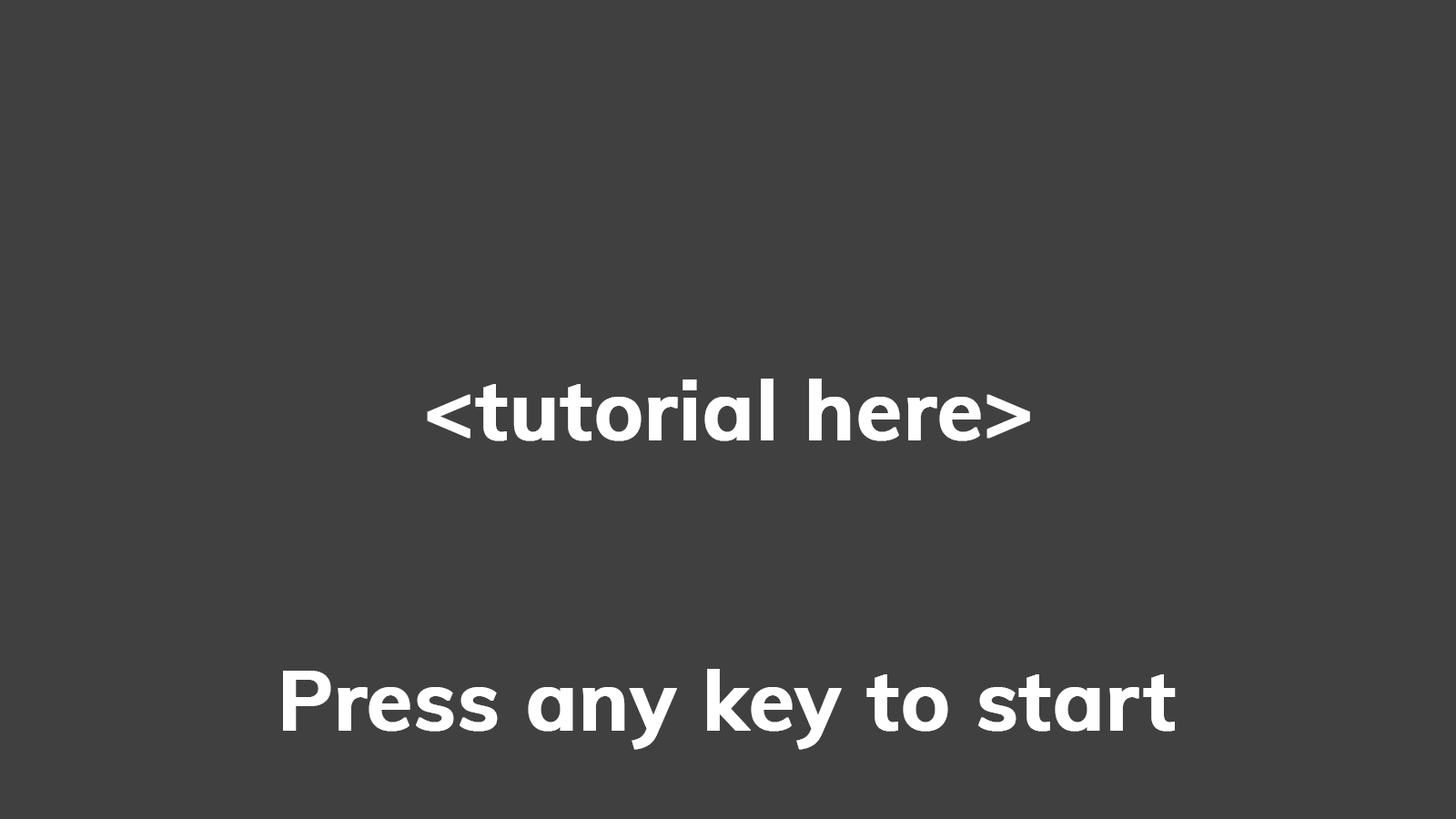
<style>
.page{position:relative;width:1456px;height:819px;background:#404040}
.page>*{position:absolute;margin:0}
.t1{font:82.2px "Muli-Bold";color:#ffffff;font-weight:bold}
</style>
<div class="page">
<p class="t1" style="left:427px;top:379px;width:603px;height:62px">&lt;tutorial here&gt;</p>
<p class="t1" style="left:283px;top:669px;width:893px;height:81px">Press any key to start</p>
</div>
